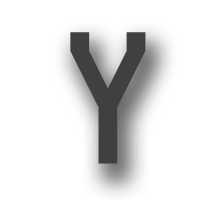
<style>
.page{position:relative;width:215px;height:200px;background:#ffffff}
.page>*{position:absolute;margin:0}
.t1{font:150px "Manteka";color:#3f4040}
</style>
<div class="page">
<p class="t1" style="left:70px;top:32px;width:76px;height:132px">Y</p>
</div>
